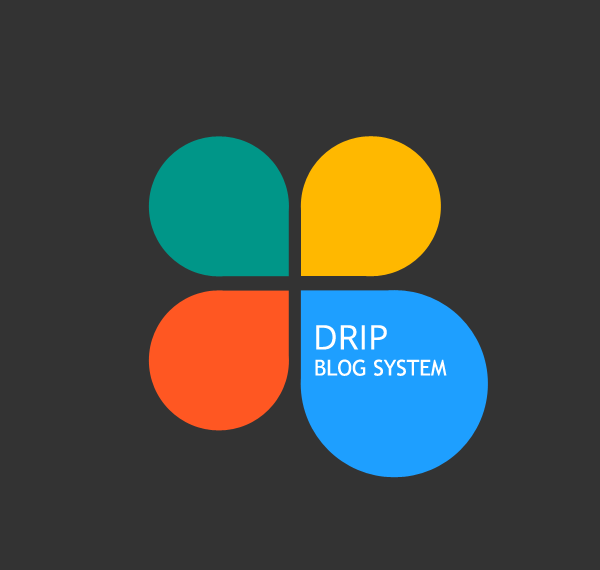
<style>
.page{position:relative;width:600px;height:570px;background:#333333}
.page>*{position:absolute;margin:0}
.t1{font:33.9px "OpenSans";color:#ffffff;text-transform:uppercase}
.t2{font:21.8px "TrebuchetMS";color:#ffffff;text-transform:uppercase}
</style>
<div class="page">
<p class="t1" style="left:316px;top:325px;width:71px;height:25px">DRIP</p>
<p class="t2" style="left:315px;top:359px;width:132px;height:17px">blog system</p>
</div>
